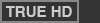
<style>
.page{position:relative;width:100px;height:23px;background:#333333}
.page>*{position:absolute;margin:0}
.t1{font:15px "Helvetica-Bold";color:#cccccc;text-transform:uppercase}
</style>
<div class="page">
<p class="t1" style="left:5px;top:6px;width:67px;height:11px">TRUE HD</p>
</div>
